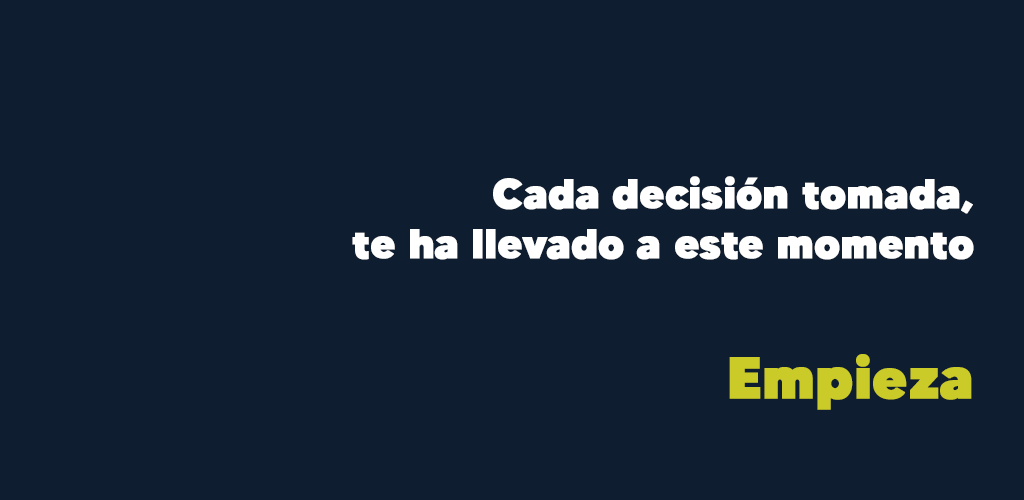
<style>
.page{position:relative;width:1024px;height:500px;background:#0e1d2f}
.page>*{position:absolute;margin:0}
.t1{font:41.7px "MADETOMMY-Black";color:#ffffff;font-weight:bold}
.t2{font:58.3px "MADETOMMY-Black";color:#caca29;font-weight:bold}
</style>
<div class="page">
<p class="t1" style="left:352px;top:176px;width:622px;height:234px;text-align:right">Cada decisión tomada, <br>te ha llevado a este momento<br><span class="t2"><br>Empieza</span></p>
</div>
